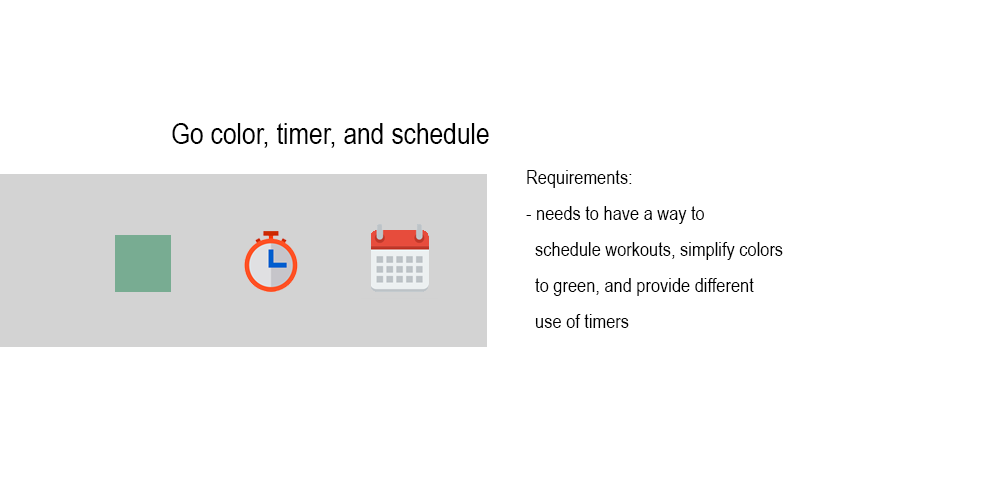
<style>
.page{position:relative;width:1000px;height:500px;background:#ffffff}
.page>*{position:absolute;margin:0}
.t1{font:30px "ArialNarrow";color:#000000}
.t2{font:20px/18px "ArialNarrow";color:#000000}
</style>
<div class="page">
<p class="t1" style="left:172px;top:123px;width:317px;height:25px">Go color, timer, and schedule</p>
<p class="t2" style="left:526px;top:170px;width:257px;height:158px">Requirements:<br><br>- needs to have a way to <br><br>  schedule workouts, simplify colors<br><br>  to green, and provide different<br><br>  use of timers</p>
</div>
